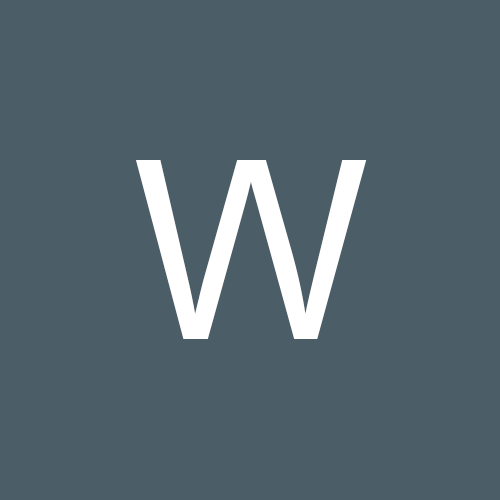
<style>
.page{position:relative;width:500px;height:500px;background:#4b5d67}
.page>*{position:absolute;margin:0}
.t1{font:250px "ArialMT";color:#ffffff}
</style>
<div class="page">
<p class="t1" style="left:136px;top:160px;width:231px;height:179px">W</p>
</div>
